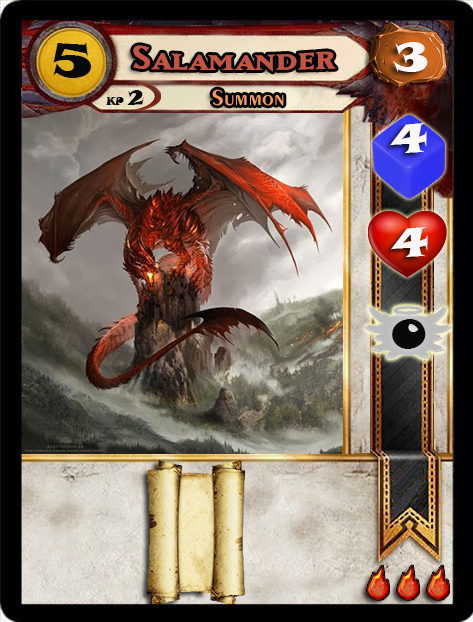
<style>
.page{position:relative;width:473px;height:622px}
.page>*{position:absolute;margin:0}
.t1{font:46.6px "SnapITC-Regular";color:#090909;scale:1.05 1}
.t2{font:40px "MatrixBoldSmallCaps";color:#c25443;scale:1.06 1}
.t3{font:40px "SnapITC-Regular";color:#fef9f9;scale:1.05 1}
.t4{font:22.7px "Exotic350BT-DemiBold";color:#f89c64;scale:1.06 1}
.t5{font:20.5px "SnapITC-Regular";color:#090909}
.t6{font:40px "SnapITC-Regular";color:#090909;scale:1.05 1}
</style>
<div class="page">
<p class="t1" style="left:53px;top:42px;width:38px;height:36px">5</p>
<p class="t2" style="left:133px;top:45px;width:203px;height:27px">Salamander</p>
<p class="t3" style="left:393px;top:42px;width:35px;height:30px">3</p>
<p class="t4" style="left:212px;top:89px;width:72px;height:17px">Summon</p>
<p class="t5" style="left:127px;top:90px;width:17px;height:15px">2</p>
<p class="t3" style="left:390px;top:123px;width:37px;height:30px">4</p>
<p class="t3" style="left:391px;top:227px;width:37px;height:30px">4</p>
<p class="t6" style="left:392px;top:319px;width:34px;height:30px">0</p>
</div>
